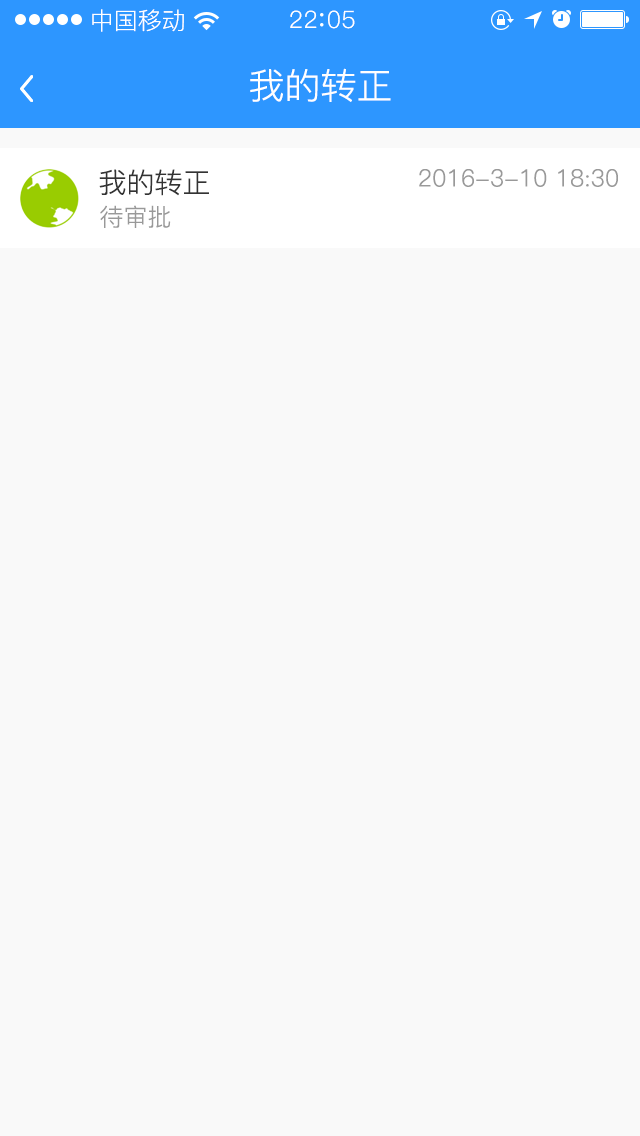
<style>
.page{position:relative;width:640px;height:1136px;background:#f9f9f9}
.page>*{position:absolute;margin:0}
.t1{font:24px "PingFang-SC-Regular";color:#ffffff}
.t2{font:24px "PingFang-SC-Regular";letter-spacing:0.03em;color:#ffffff}
.t3{font:36px "PingFang-SC-Regular";color:#ffffff}
.t4{font:28px "PingFang-SC-Regular";color:#333333}
.t5{font:24px "PingFang-SC-Regular";color:#999999}
</style>
<div class="page">
<p class="t1" style="left:92px;top:9px;width:92px;height:23px">中国移动</p>
<p class="t2" style="left:290px;top:10px;width:65px;height:19px">22 05</p>
<p class="t3" style="left:250px;top:68px;width:141px;height:34px">我的转正</p>
<p class="t4" style="left:99px;top:169px;width:110px;height:27px">我的转正</p>
<p class="t5" style="left:419px;top:169px;width:199px;height:18px">2016-3-10 18:30</p>
<p class="t5" style="left:100px;top:205px;width:71px;height:23px">待审批</p>
</div>
